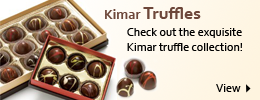
<style>
.page{position:relative;width:260px;height:100px}
.page>*{position:absolute;margin:0}
.t1{font:18px "Corbel-Bold";color:#6d473a}
.t2{font:14px "Corbel-Bold";color:#6d473a}
.t3{font:12px "Corbel";color:#000000}
</style>
<div class="page">
<p class="t1" style="left:105px;top:7px;width:96px;height:12px"><span class="t2">Kimar </span>Truffles</p>
<p class="t3" style="left:127px;top:28px;width:115px;height:23px">Check out the exquisite Kimar truffle collection!</p>
<p class="t3" style="left:216px;top:84px;width:25px;height:8px">View</p>
</div>
